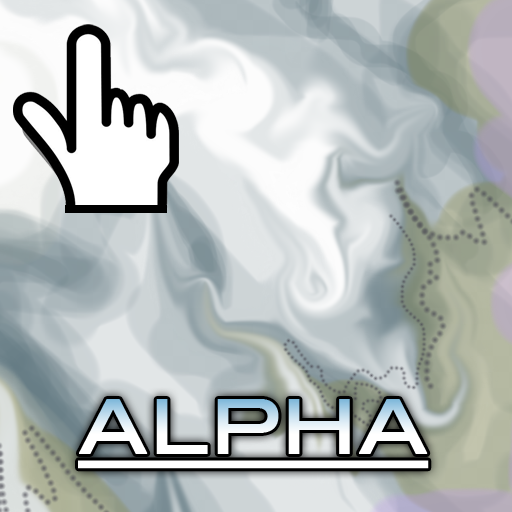
<style>
.page{position:relative;width:512px;height:512px}
.page>*{position:absolute;margin:0}
.t1{font:72px "BlairMdITCTTMedium";color:#ffffff;font-weight:bold;text-decoration:underline}
</style>
<div class="page">
<p class="t1" style="left:78px;top:399px;width:351px;height:70px">ALPHA</p>
</div>
